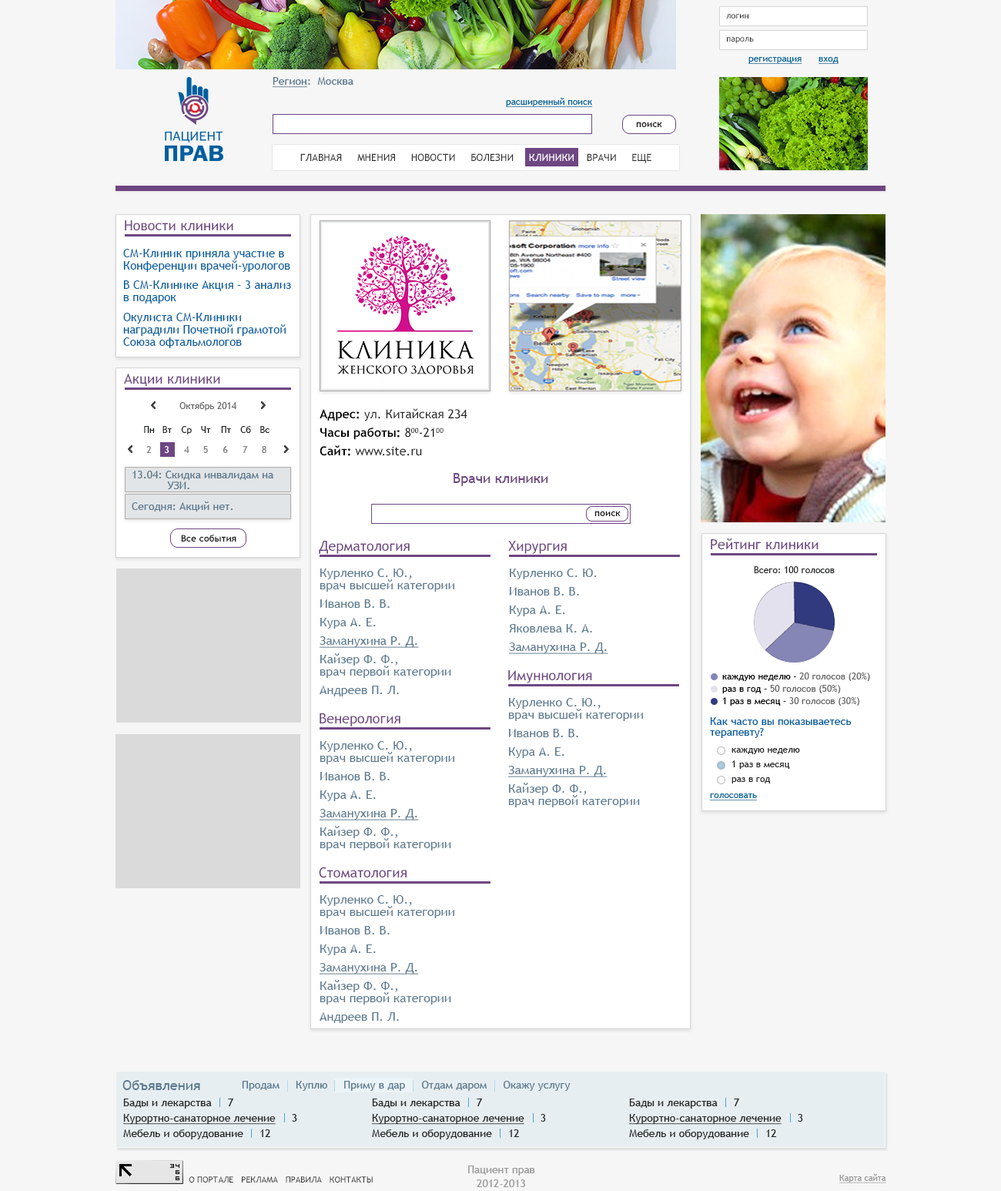
<style>
.page{position:relative;width:1001px;height:1191px;background:#f6f6f6}
.page>*{position:absolute;margin:0}
.t1{font:8.5px "TrebuchetMS";color:#1e1d1d}
.t2{font:9.2px "TrebuchetMS";color:#006699;text-decoration:underline}
.t3{font:10.8px "TrebuchetMS";color:#5a798f}
.t4{font:10.8px "TrebuchetMS";color:#5a798f;text-decoration:underline}
.t5{font:9.2px "TrebuchetMS-Bold";color:#1e1d1d}
.t6{font:10px "TrebuchetMS";color:#333333;text-transform:uppercase}
.t7{font:10px "TrebuchetMS";color:#ffffff;text-transform:uppercase}
.t8{font:13.9px "TrebuchetMS";color:#6e4682}
.t9{font:11.6px/12.3px "TrebuchetMS";color:#005e9f}
.t10{font:9.2px "TrebuchetMS";color:#686868}
.t11{font:12.3px/18.5px "TrebuchetMS";color:#252627}
.t12{font:12.3px/18.5px "TrebuchetMS-Bold";color:#000000}
.t13{font:9.2px "TrebuchetMS";color:#1c1e20}
.t14{font:9.2px "TrebuchetMS";color:#1d2021}
.t15{font:9.2px "TrebuchetMS";color:#1b1e1f}
.t16{font:9.2px "TrebuchetMS";color:#1d1f21}
.t17{font:9.2px "TrebuchetMS";color:#7e7e7e}
.t18{font:9.2px "TrebuchetMS";color:#ffffff}
.t19{font:10.8px/13.9px "TrebuchetMS";color:#5a798f}
.t20{font:10.8px/10.8px "TrebuchetMS";color:#5a798f}
.t21{font:12.3px/18.5px "TrebuchetMS";color:#5a798f}
.t22{font:12.3px/12.3px "TrebuchetMS";color:#5a798f}
.t23{font:12.3px/18.5px "TrebuchetMS";color:#5a798f;text-decoration:underline}
.t24{font:9.2px "TrebuchetMS";color:#252627}
.t25{font:9.2px "TrebuchetMS";color:#666666}
.t26{font:9.2px "TrebuchetMS";color:#000000}
.t27{font:10.8px/13.9px "TrebuchetMS";color:#005e9f}
.t28{font:10.8px/10.8px "TrebuchetMS";color:#005e9f}
.t29{font:13.9px "TrebuchetMS";color:#5a798f}
.t30{font:10.8px/15.4px "TrebuchetMS";color:#252627}
.t31{font:10.8px/15.4px "TrebuchetMS";color:#252627;text-decoration:underline}
.t32{font:10.8px/13.9px "TrebuchetMS";color:#999999}
.t33{font:8.5px "TrebuchetMS";color:#333333;text-transform:uppercase}
.t34{font:8.5px "TrebuchetMS";color:#999999;text-decoration:underline}
</style>
<div class="page">
<p class="t1" style="left:726px;top:14px;width:23px;height:4px">логин</p>
<p class="t1" style="left:727px;top:37px;width:27px;height:7px">пароль</p>
<p class="t2" style="left:749px;top:57px;width:90px;height:7px">регистрация      вход</p>
<p class="t3" style="left:273px;top:77px;width:81px;height:11px"><span class="t4">Регион</span>:  Москва</p>
<p class="t2" style="left:506px;top:98px;width:87px;height:9px">расширенный поиск</p>
<p class="t5" style="left:636px;top:122px;width:26px;height:5px">поиск</p>
<p class="t6" style="left:300px;top:153px;width:352px;height:10px">Главная     Мнения     Новости     Болезни     <span class="t7">Клиники</span>    Врачи     Еще</p>
<p class="t8" style="left:125px;top:220px;width:108px;height:11px">Новости клиники</p>
<p class="t9" style="left:123px;top:249px;width:167px;height:23px">СМ-Клиник приняла участие в<br>Конференции врачей-урологов</p>
<p class="t9" style="left:123px;top:280px;width:168px;height:23px">В СМ-Клинике Акция – 3 анализ<br>в подарок</p>
<p class="t9" style="left:123px;top:313px;width:163px;height:35px">Окулиста СМ-Клиники<br>наградили Почетной грамотой<br>Союза офтальмологов</p>
<p class="t8" style="left:124px;top:374px;width:96px;height:12px">Акции клиники</p>
<p class="t10" style="left:179px;top:402px;width:57px;height:9px">Октябрь 2014</p>
<p class="t11" style="left:320px;top:408px;width:148px;height:48px"><span class="t12">Адрес:</span> ул. Китайская 234<br><span class="t12">Часы работы:</span> 800-2100<br><span class="t12">Сайт: </span>www.site.ru</p>
<p class="t13" style="left:144px;top:426px;width:11px;height:7px">Пн</p>
<p class="t14" style="left:163px;top:426px;width:9px;height:7px">Вт</p>
<p class="t15" style="left:181px;top:426px;width:11px;height:8px">Ср</p>
<p class="t16" style="left:201px;top:426px;width:10px;height:7px">Чт</p>
<p class="t16" style="left:221px;top:426px;width:10px;height:7px">Пт</p>
<p class="t16" style="left:240px;top:426px;width:11px;height:7px">Сб</p>
<p class="t16" style="left:260px;top:426px;width:10px;height:7px">Вс</p>
<p class="t17" style="left:146px;top:446px;width:6px;height:7px">2</p>
<p class="t18" style="left:165px;top:446px;width:4px;height:7px">3</p>
<p class="t17" style="left:184px;top:446px;width:5px;height:7px">4</p>
<p class="t17" style="left:203px;top:446px;width:5px;height:7px">5</p>
<p class="t17" style="left:223px;top:446px;width:5px;height:7px">6</p>
<p class="t17" style="left:243px;top:446px;width:5px;height:7px">7</p>
<p class="t17" style="left:262px;top:446px;width:5px;height:7px">8</p>
<p class="t19" style="left:132px;top:471px;width:141px;height:18px">13.04: Скидка инвалидам на<br><span class="t20">           УЗИ.</span></p>
<p class="t8" style="left:454px;top:473px;width:94px;height:13px">Врачи клиники</p>
<p class="t3" style="left:132px;top:501px;width:101px;height:10px">Сегодня: Акций нет.</p>
<p class="t5" style="left:595px;top:511px;width:26px;height:5px">поиск</p>
<p class="t5" style="left:181px;top:535px;width:55px;height:6px">Все события</p>
<p class="t8" style="left:319px;top:541px;width:91px;height:13px">Дерматология</p>
<p class="t8" style="left:508px;top:541px;width:59px;height:13px">Хирургия</p>
<p class="t8" style="left:711px;top:538px;width:108px;height:12px">Рейтинг клиники</p>
<p class="t21" style="left:320px;top:568px;width:134px;height:128px">Курленко С. Ю.,<br><span class="t22">врач высшей категории<br></span>Иванов В. В.<br>Кура А. Е.<br><span class="t23">Заманухина Р. Д.<br></span>Кайзер Ф. Ф.,<br><span class="t22">врач первой категории<br></span>Андреев П. Л.</p>
<p class="t21" style="left:509px;top:568px;width:100px;height:86px">Курленко С. Ю.<br>Иванов В. В.<br>Кура А. Е.<br>Яковлева К. А.<br><span class="t23">Заманухина Р. Д.</span></p>
<p class="t24" style="left:754px;top:566px;width:81px;height:7px">Всего: 100 голосов</p>
<p class="t8" style="left:508px;top:670px;width:84px;height:13px">Имуннология</p>
<p class="t25" style="left:723px;top:672px;width:147px;height:9px"><span class="t26">каждую неделю - </span>20 голосов (20%)</p>
<p class="t25" style="left:723px;top:685px;width:118px;height:8px"><span class="t26">раз в год - </span>50 голосов (50%)</p>
<p class="t21" style="left:508px;top:698px;width:135px;height:109px">Курленко С. Ю.,<br><span class="t22">врач высшей категории<br></span>Иванов В. В.<br>Кура А. Е.<br><span class="t23">Заманухина Р. Д.<br></span>Кайзер Ф. Ф.,<br><span class="t22">врач первой категории</span></p>
<p class="t25" style="left:723px;top:697px;width:137px;height:9px"><span class="t26">1 раз в месяц - </span>30 голосов (30%)</p>
<p class="t8" style="left:320px;top:712px;width:81px;height:14px">Венерология</p>
<p class="t27" style="left:710px;top:717px;width:142px;height:21px">Как часто вы показываетесь <br><span class="t28">терапевту?</span></p>
<p class="t21" style="left:320px;top:741px;width:134px;height:109px">Курленко С. Ю.,<br><span class="t22">врач высшей категории<br></span>Иванов В. В.<br>Кура А. Е.<br><span class="t23">Заманухина Р. Д.<br></span>Кайзер Ф. Ф.,<br><span class="t22">врач первой категории</span></p>
<p class="t24" style="left:732px;top:748px;width:68px;height:6px">каждую неделю</p>
<p class="t24" style="left:733px;top:760px;width:57px;height:9px">1 раз в месяц</p>
<p class="t24" style="left:732px;top:777px;width:39px;height:6px">раз в год</p>
<p class="t2" style="left:710px;top:793px;width:48px;height:7px">голосовать</p>
<p class="t8" style="left:319px;top:867px;width:88px;height:11px">Стоматология</p>
<p class="t21" style="left:320px;top:895px;width:134px;height:128px">Курленко С. Ю.,<br><span class="t22">врач высшей категории<br></span>Иванов В. В.<br>Кура А. Е.<br><span class="t23">Заманухина Р. Д.<br></span>Кайзер Ф. Ф.,<br><span class="t22">врач первой категории<br></span>Андреев П. Л.</p>
<p class="t29" style="left:122px;top:1080px;width:78px;height:10px">Объявления</p>
<p class="t3" style="left:242px;top:1081px;width:329px;height:10px">Продам     Куплю     Приму в дар     Отдам даром     Окажу услугу</p>
<p class="t30" style="left:123px;top:1098px;width:174px;height:41px">Бады и лекарства     7<br><span class="t31">Курортно-санаторное лечение</span>     3<br>Мебель и оборудование     12</p>
<p class="t30" style="left:372px;top:1098px;width:174px;height:41px">Бады и лекарства     7<br><span class="t31">Курортно-санаторное лечение</span>     3<br>Мебель и оборудование     12</p>
<p class="t30" style="left:629px;top:1098px;width:174px;height:41px">Бады и лекарства     7<br><span class="t31">Курортно-санаторное лечение</span>     3<br>Мебель и оборудование     12</p>
<p class="t32" style="left:468px;top:1165px;width:67px;height:22px;text-align:center">Пациент прав<br>2012-2013</p>
<p class="t33" style="left:189px;top:1176px;width:184px;height:6px">о портале   реклама   правила   контакты</p>
<p class="t34" style="left:840px;top:1174px;width:47px;height:9px">Карта сайта</p>
</div>
